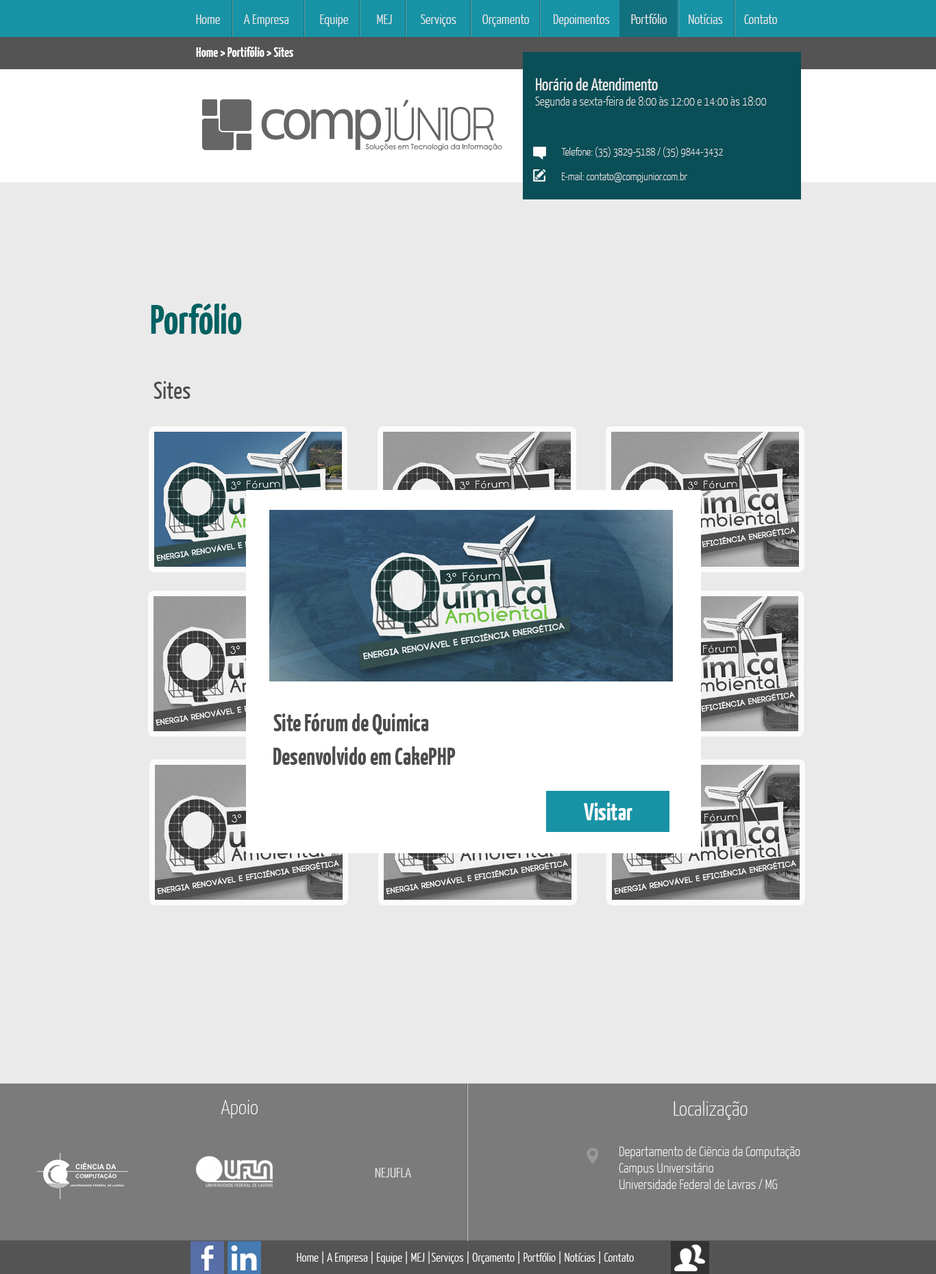
<style>
.page{position:relative;width:936px;height:1274px;background:#eaeaea}
.page>*{position:absolute;margin:0}
.t1{font:13.7px "YanoneKaffeesatz-Light";color:#eaeaea}
.t2{font:17.1px "YanoneKaffeesatz-Light";color:#999999}
.t3{font:13.7px "YanoneKaffeesatz-Bold";color:#fffdfd}
.t4{font:12.3px "YanoneKaffeesatz-ExtraLight";color:#eaeaea}
.t5{font:17.1px "YanoneKaffeesatz-Regular";color:#eaeaea}
.t6{font:11px "YanoneKaffeesatz-ExtraLight";color:#eaeaea}
.t7{font:13.7px "YanoneKaffeesatz-ExtraLight";color:#eaeaea}
.t8{font:41.1px "YanoneKaffeesatz-Bold";color:#006263}
.t9{font:24.7px "YanoneKaffeesatz-Regular";color:#4d4d4d}
.t10{font:24.7px "YanoneKaffeesatz-Bold";color:#4d4d4d}
.t11{font:24.7px "YanoneKaffeesatz-Bold";color:#f9fcfc}
.t12{font:20.6px "YanoneKaffeesatz-ExtraLight";color:#ffffff}
.t13{font:20.6px "YanoneKaffeesatz-ExtraLight";color:#fefefe}
.t14{font:13.7px "YanoneKaffeesatz-ExtraLight";color:#ffffff}
.t15{font:12.3px "YanoneKaffeesatz-Light";color:#ffffff}
</style>
<div class="page">
<p class="t1" style="left:196px;top:14px;width:581px;height:13px"><span class="t2"> </span>Home          A Empresa             Equipe            MEJ            Serviços           Orçamento          Depoimentos         Portfólio         Notícias         Contato</p>
<p class="t3" style="left:196px;top:47px;width:97px;height:10px">Home &gt; Portifólio &gt; Sites</p>
<p class="t4" style="left:535px;top:77px;width:231px;height:31px"><span class="t5">Horário de Atendimento<br></span>Segunda a sexta-feira de 8:00 às 12:00 e 14:00 às 18:00</p>
<p class="t6" style="left:561px;top:147px;width:162px;height:11px"><span class="t7"><br></span>Telefone: (35) 3829-5188 / (35) 9844-3432</p>
<p class="t6" style="left:562px;top:172px;width:125px;height:10px"><span class="t7"><br></span>E-mail: contato@compjunior.com.br</p>
<p class="t8" style="left:151px;top:304px;width:91px;height:30px">Porfólio</p>
<p class="t9" style="left:153px;top:381px;width:38px;height:18px">Sites</p>
<p class="t10" style="left:273px;top:713px;width:156px;height:22px">Site Fórum de Quimica</p>
<p class="t10" style="left:273px;top:746px;width:183px;height:19px">Desenvolvido em CakePHP</p>
<p class="t11" style="left:584px;top:802px;width:48px;height:18px">Visitar</p>
<p class="t12" style="left:221px;top:1100px;width:37px;height:18px">Apoio</p>
<p class="t13" style="left:674px;top:1101px;width:74px;height:19px">Localização</p>
<p class="t14" style="left:619px;top:1146px;width:181px;height:43px">Departamento de Ciência da Computação<br>Campus Universitário<br>Universidade Federal de Lavras / MG</p>
<p class="t1" style="left:375px;top:1168px;width:36px;height:9px">NEJUFLA</p>
<p class="t15" style="left:297px;top:1251px;width:337px;height:13px"><span class="t2"> </span>Home | A Empresa | Equipe | MEJ |Serviços | Orçamento | Portfólio | Notícias | Contato</p>
</div>
